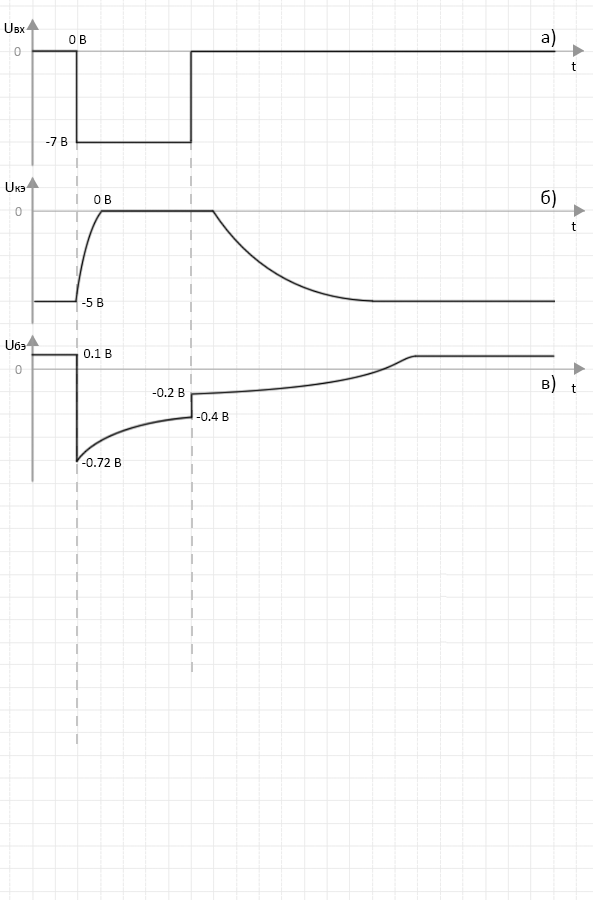
<style>
.page{position:relative;width:593px;height:900px;background:#ffffff}
.page>*{position:absolute;margin:0}
.t1{font:16px "Calibri";color:#000000}
.t2{font:12px "Calibri";color:#000000}
.t3{font:20px "Calibri";color:#000000}
.t4{font:14px "Calibri";color:#000000}
.t5{font:14px "Calibri";color:#969696}
</style>
<div class="page">
<p class="t1" style="left:4px;top:23px;width:9px;height:10px">U</p>
<p class="t2" style="left:14px;top:27px;width:11px;height:6px">вх</p>
<p class="t3" style="left:541px;top:29px;width:15px;height:18px">а)</p>
<p class="t4" style="left:69px;top:35px;width:18px;height:9px">0 В</p>
<p class="t5" style="left:14px;top:47px;width:7px;height:9px">0</p>
<p class="t4" style="left:571px;top:62px;width:5px;height:9px">t</p>
<p class="t4" style="left:46px;top:137px;width:22px;height:9px">-7 В</p>
<p class="t1" style="left:5px;top:182px;width:9px;height:10px">U</p>
<p class="t2" style="left:15px;top:186px;width:11px;height:6px">кэ</p>
<p class="t4" style="left:94px;top:195px;width:18px;height:9px">0 В</p>
<p class="t3" style="left:541px;top:190px;width:15px;height:18px">б)</p>
<p class="t5" style="left:15px;top:207px;width:7px;height:9px">0</p>
<p class="t4" style="left:571px;top:222px;width:5px;height:9px">t</p>
<p class="t4" style="left:82px;top:298px;width:22px;height:9px">-5 В</p>
<p class="t1" style="left:5px;top:340px;width:9px;height:10px">U</p>
<p class="t2" style="left:14px;top:342px;width:12px;height:8px">бэ</p>
<p class="t4" style="left:84px;top:349px;width:28px;height:9px">0.1 В</p>
<p class="t5" style="left:15px;top:365px;width:7px;height:9px">0</p>
<p class="t3" style="left:542px;top:375px;width:14px;height:18px">в)</p>
<p class="t4" style="left:152px;top:388px;width:33px;height:9px">-0.2 В</p>
<p class="t4" style="left:571px;top:384px;width:5px;height:9px">t</p>
<p class="t4" style="left:196px;top:412px;width:33px;height:9px">-0.4 В</p>
<p class="t4" style="left:82px;top:458px;width:40px;height:9px">-0.72 В</p>
</div>
